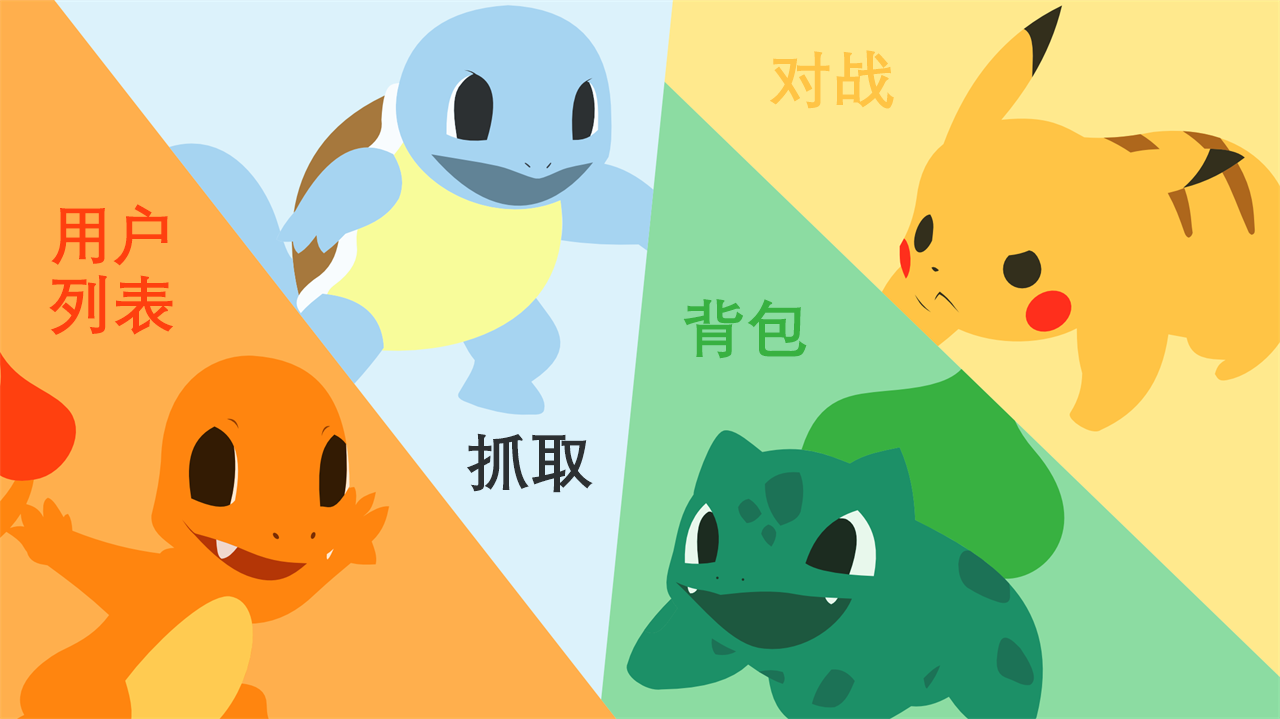
<style>
.page{position:relative;width:1280px;height:719px}
.page>*{position:absolute;margin:0}
.t1{font:64px "DengXian-Bold";color:#ffc445}
.t2{font:64px "DengXian-Bold";color:#ff400f}
.t3{font:64px "DengXian-Bold";color:#38b141}
.t4{font:64px "DengXian-Bold";color:#2c3032}
</style>
<div class="page">
<p class="t1" style="left:770px;top:50px;width:124px;height:59px">对战</p>
<p class="t2" style="left:51px;top:204px;width:117px;height:62px">用户</p>
<p class="t2" style="left:49px;top:275px;width:124px;height:60px">列表</p>
<p class="t3" style="left:683px;top:299px;width:124px;height:60px">背包</p>
<p class="t4" style="left:467px;top:433px;width:126px;height:60px">抓取</p>
</div>
